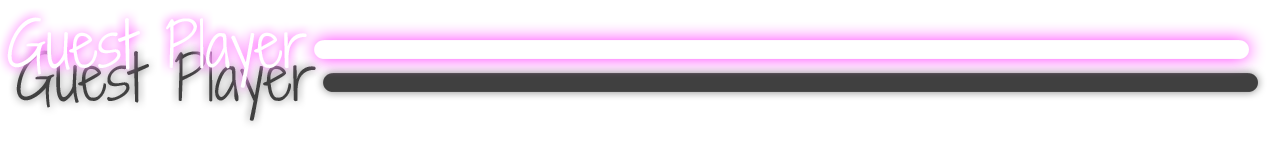
<style>
.page{position:relative;width:1280px;height:160px;background:#ffffff}
.page>*{position:absolute;margin:0}
.t1{font:60px "ShadowsIntoLight";color:#404040}
</style>
<div class="page">
<p class="t1" style="left:16px;top:50px;width:300px;height:71px">Guest Player</p>
</div>
